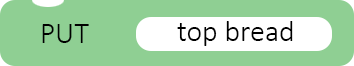
<style>
.page{position:relative;width:354px;height:66px;background:#8fcf93}
.page>*{position:absolute;margin:0}
.t1{font:30px "Calibri-Light";color:#000000}
</style>
<div class="page">
<p class="t1" style="left:42px;top:24px;width:47px;height:19px">PUT</p>
<p class="t1" style="left:177px;top:21px;width:116px;height:25px">top bread</p>
</div>
